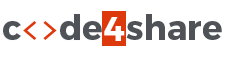
<style>
.page{position:relative;width:226px;height:57px;background:#ffffff}
.page>*{position:absolute;margin:0}
.t1{font:34px "Consolas";color:#dd390d}
.t2{font:34px "Montserrat-Bold";color:#4f5357}
.t3{font:34px "Montserrat-Bold";color:#ffffff}
</style>
<div class="page">
<p class="t1" style="left:3px;top:14px;width:99px;height:26px"><span class="t2">c</span>&lt;&gt;<span class="t2">de</span></p>
<p class="t3" style="left:104px;top:17px;width:21px;height:24px">4</p>
<p class="t2" style="left:126px;top:14px;width:96px;height:26px">share</p>
</div>
